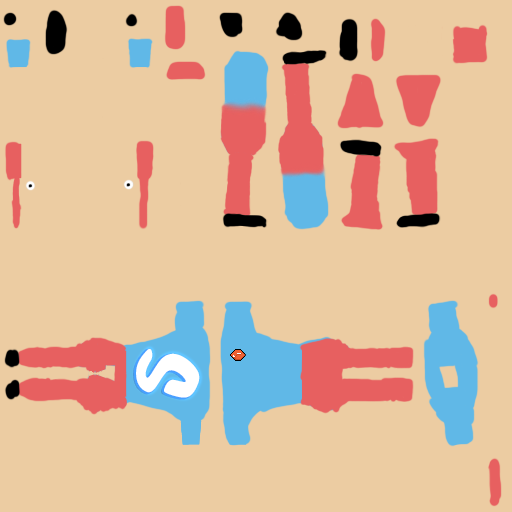
<style>
.page{position:relative;width:512px;height:512px;background:#eccca2}
.page>*{position:absolute;margin:0}
.t1{font:69.7px "KomikaAxis";color:#ffffff}
</style>
<div class="page">
<p class="t1" style="left:136px;top:349px;width:64px;height:49px;rotate:90deg">S</p>
</div>
